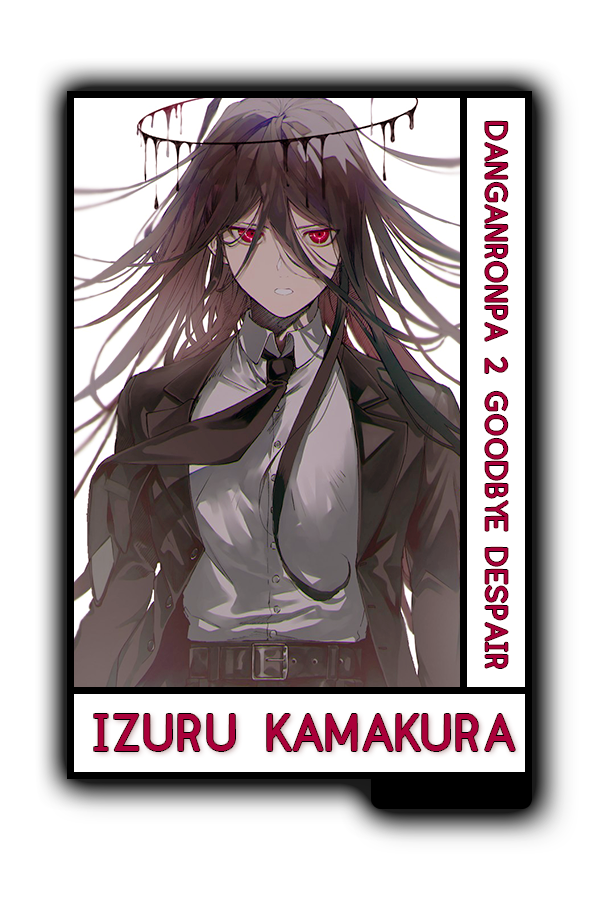
<style>
.page{position:relative;width:600px;height:900px;background:#ffffff}
.page>*{position:absolute;margin:0}
.t1{font:31.2px "cream-DEMO";color:#aa003a}
.t2{font:51.4px "cream-DEMO";color:#aa003a}
</style>
<div class="page">
<p class="t1" style="left:485px;top:121px;width:23px;height:547px;rotate:90deg">DANGANRONPA 2 GOODBYE DESPAIR</p>
<p class="t2" style="left:94px;top:714px;width:421px;height:37px">IZURU KAMAKURA</p>
</div>
